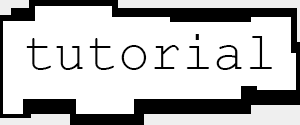
<style>
.page{position:relative;width:300px;height:125px;background:#ffffff}
.page>*{position:absolute;margin:0}
.t1{font:53px "CourierNewPSMT";color:#000000}
</style>
<div class="page">
<p class="t1" style="left:26px;top:34px;width:246px;height:36px">tutorial</p>
</div>
